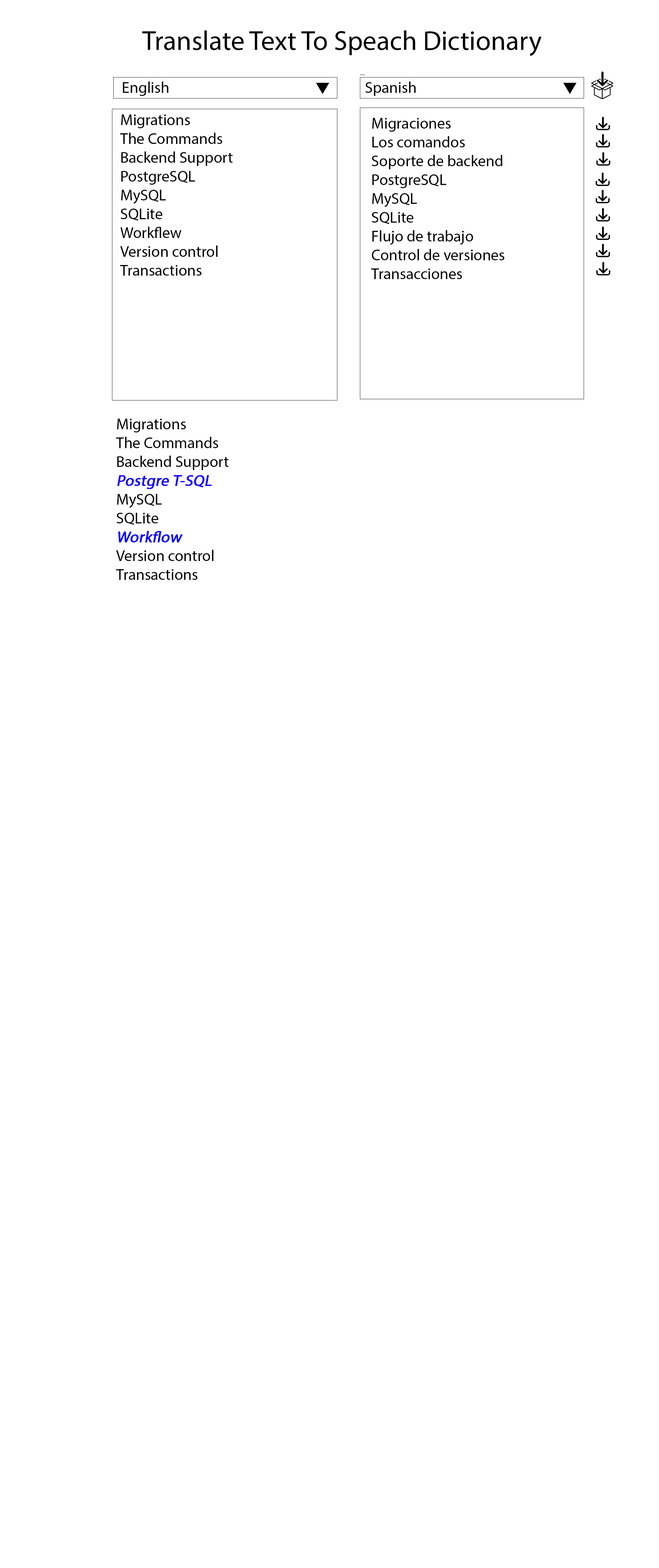
<style>
.page{position:relative;width:659px;height:1568px;background:#ffffff}
.page>*{position:absolute;margin:0}
.t1{font:27.3px "MyriadPro-Regular";color:#000000}
.t2{font:15.7px "MyriadPro-Regular";color:#000000}
.t3{font:15.7px "MyriadPro-Regular";color:#1200ff;font-weight:bold;font-style:italic}
.t4{font:15.7px "MyriadPro-Regular";color:#0600ff;font-weight:bold;font-style:italic}
</style>
<div class="page">
<p class="t1" style="left:142px;top:30px;width:399px;height:26px">Translate Text To Speach Dictionary</p>
<p class="t2" style="left:123px;top:82px;width:45px;height:14px">English</p>
<p class="t2" style="left:365px;top:82px;width:51px;height:14px">Spanish</p>
<p class="t2" style="left:120px;top:114px;width:113px;height:162px">Migrations<br>The Commands<br>Backend Support<br>PostgreSQL<br>MySQL<br>SQLite<br>Workflew<br>Version control<br>Transactions</p>
<p class="t2" style="left:371px;top:118px;width:133px;height:161px">Migraciones<br>Los comandos<br>Soporte de backend<br>PostgreSQL<br>MySQL<br>SQLite<br>Flujo de trabajo<br>Control de versiones<br>Transacciones</p>
<p class="t2" style="left:116px;top:419px;width:113px;height:161px">Migrations<br>The Commands<br>Backend Support<br><span class="t3">Postgre T-SQL<br></span>MySQL<br>SQLite<br><span class="t4">Workflow<br></span>Version control<br>Transactions</p>
</div>
